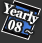
<style>
.page{position:relative;width:42px;height:43px;background:#333333}
.page>*{position:absolute;margin:0}
.t1{font:13px/14px "RyuminPro-ExBold";letter-spacing:-0.08em;color:#ffffff;font-weight:bold}
.t2{font:13px/14px "RyuminPro-ExBold";color:#ffffff;font-weight:bold}
.t3{font:13px/14px "TimesNewRomanPSMT";color:#ffffff;font-weight:bold}
</style>
<div class="page">
<p class="t1" style="left:3px;top:2px;width:36px;height:32px;text-align:center;rotate:19deg">Yearly<br><span class="t2">  08 </span><span class="t3">~</span></p>
</div>
